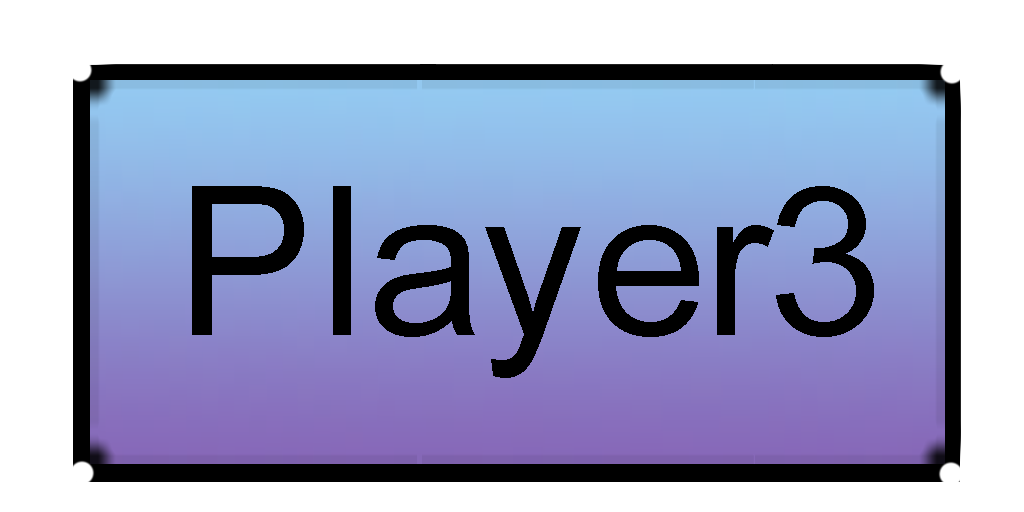
<style>
.page{position:relative;width:1024px;height:512px;background:#ffffff}
.page>*{position:absolute;margin:0}
.t1{font:208px "ArialMT";color:#000000}
</style>
<div class="page">
<p class="t1" style="left:192px;top:186px;width:682px;height:192px">Player3</p>
</div>
